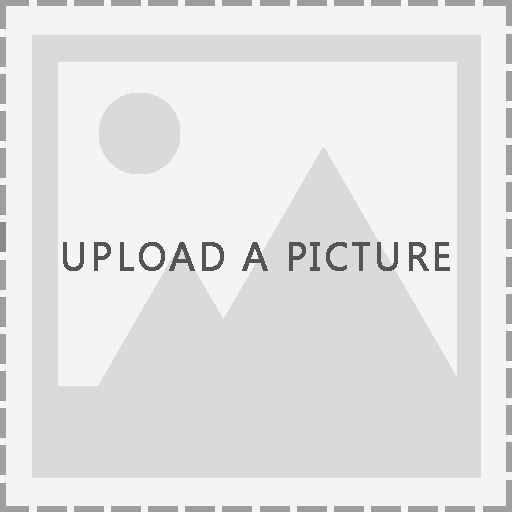
<style>
.page{position:relative;width:512px;height:512px;background:#f4f4f4}
.page>*{position:absolute;margin:0}
.t1{font:39px "MicrosoftTaiLe";letter-spacing:0.06em;color:#555555;font-weight:bold}
</style>
<div class="page">
<p class="t1" style="left:63px;top:242px;width:387px;height:29px">UPLOAD A PICTURE</p>
</div>
